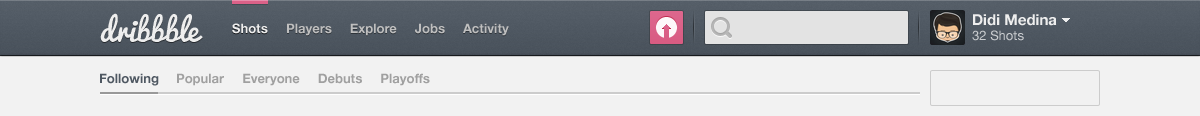
<style>
.page{position:relative;width:1200px;height:116px;background:#f2f2f2}
.page>*{position:absolute;margin:0}
.t1{font:30px "Pacifico";color:#eeeeee}
.t2{font:15px "HelveticaNeue-Bold";color:#eeeeee}
.t3{font:13px "HelveticaNeue-Bold";color:#eeeeee}
.t4{font:13px "HelveticaNeue-Bold";color:#bfbfbf}
.t5{font:13px "HelveticaNeue";color:#cacdcf}
.t6{font:13px "HelveticaNeue-Bold";color:#4f5862}
.t7{font:13px "HelveticaNeue-Bold";color:#a0a0a0}
</style>
<div class="page">
<p class="t1" style="left:100px;top:13px;width:103px;height:29px">dribbble</p>
<p class="t2" style="left:973px;top:14px;width:84px;height:12px">Didi Medina</p>
<p class="t3" style="left:232px;top:23px;width:36px;height:11px">Shots</p>
<p class="t4" style="left:287px;top:23px;width:222px;height:13px">Players     Explore     Jobs     Activity</p>
<p class="t5" style="left:972px;top:30px;width:52px;height:11px">32 Shots</p>
<p class="t6" style="left:100px;top:73px;width:59px;height:13px">Following</p>
<p class="t7" style="left:177px;top:73px;width:253px;height:13px">Popular     Everyone     Debuts     Playoffs</p>
</div>
